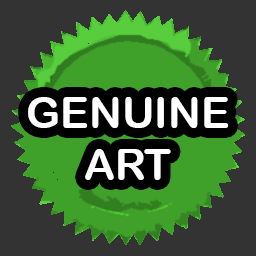
<style>
.page{position:relative;width:256px;height:256px;background:#333333}
.page>*{position:absolute;margin:0}
.t1{font:43.2px "ArialRoundedMTBold";color:#ffffff}
</style>
<div class="page">
<p class="t1" style="left:28px;top:97px;width:201px;height:83px;text-align:center">GENUINE<br>ART</p>
</div>
